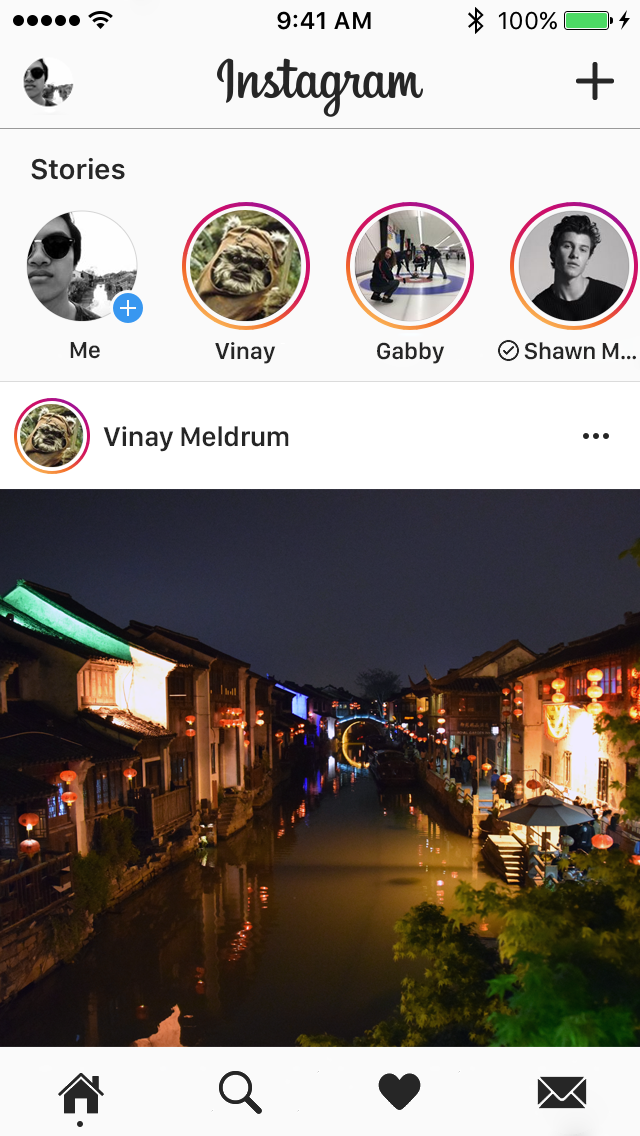
<style>
.page{position:relative;width:640px;height:1136px;background:#fafafa}
.page>*{position:absolute;margin:0}
.t1{font:24px "SanFranciscoDisplay-Semibold";color:#262626}
.t2{font:28px "SanFranciscoDisplay-Semibold";color:#262626}
</style>
<div class="page">
<p class="t1" style="left:70px;top:342px;width:30px;height:17px">Me</p>
<p class="t1" style="left:215px;top:342px;width:61px;height:22px">Vinay</p>
<p class="t1" style="left:377px;top:342px;width:68px;height:22px">Gabby</p>
<p class="t1" style="left:524px;top:342px;width:112px;height:18px">Shawn M…</p>
<p class="t2" style="left:103px;top:426px;width:186px;height:26px">Vinay Meldrum</p>
</div>
